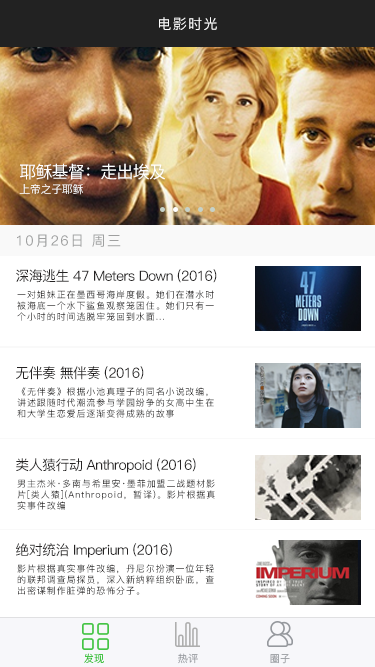
<style>
.page{position:relative;width:375px;height:667px;background:#ffffff}
.page>*{position:absolute;margin:0}
.t1{font:14px "PingFang-SC-Medium";letter-spacing:0.1em;color:#ffffff}
.t2{font:16.9px "PingFang-SC-Medium";letter-spacing:-0.04em;color:#ffffff}
.t3{font:11.1px "PingFang-SC-Medium";letter-spacing:-0.04em;color:#ffffff}
.t4{font:14px "PingFang-SC-Medium";letter-spacing:0.1em;color:#9fa0a0}
.t5{font:14px "PingFang-SC-Medium";letter-spacing:-0.04em;color:#252323}
.t6{font:9px/11px "PingFang-SC-Medium";letter-spacing:0.1em;color:#252323}
.t7{font:9px/11px "PingFang-SC-Medium";letter-spacing:0.1em}
.t8{font:10.1px "PingFang-SC-Regular"}
.t9{font:10.1px "PingFang-SC-Regular";color:#95989d}
</style>
<div class="page">
<p class="t1" style="left:159px;top:17px;width:58px;height:13px">电影时光</p>
<p class="t2" style="left:20px;top:163px;width:145px;height:17px">耶稣基督：走出埃及</p>
<p class="t3" style="left:19px;top:184px;width:64px;height:11px">上帝之子耶稣</p>
<p class="t4" style="left:17px;top:234px;width:104px;height:13px">10月26日 周三</p>
<p class="t5" style="left:16px;top:269px;width:201px;height:14px">深海逃生 47 Meters Down (2016)</p>
<p class="t6" style="left:17px;top:290px;width:197px;height:31px">一对姐妹正在墨西哥海岸度假。她们在潜水时被海底一个水下鲨鱼观察笼困住。她们只有一个小时的时间逃脱牢笼回到水面...</p>
<p class="t5" style="left:16px;top:366px;width:128px;height:14px">无伴奏 無伴奏 (2016)</p>
<p class="t6" style="left:17px;top:387px;width:197px;height:31px">《无伴奏》根据小池真理子的同名小说改编，讲述跟随时代潮流参与学园纷争的女高中生在和大学生恋爱后逐渐变得成熟的故事</p>
<p class="t5" style="left:16px;top:458px;width:180px;height:15px">类人猿行动 Anthropoid (2016)</p>
<p class="t7" style="left:17px;top:479px;width:198px;height:31px">男主杰米·多南与希里安·墨菲加盟二战题材影片[类人猿](Anthropoid，暂译)。影片根据真实事件改编</p>
<p class="t5" style="left:16px;top:543px;width:156px;height:15px">绝对统治 Imperium (2016)</p>
<p class="t6" style="left:17px;top:564px;width:197px;height:31px">影片根据真实事件改编，丹尼尔扮演一位年轻的联邦调查局探员，深入新纳粹组织卧底，查出密谋制作脏弹的恐怖分子。</p>
<p class="t8" style="left:84px;top:653px;width:20px;height:11px">发现</p>
<p class="t9" style="left:178px;top:653px;width:20px;height:11px">热评</p>
<p class="t9" style="left:270px;top:654px;width:20px;height:10px">圈子</p>
</div>
